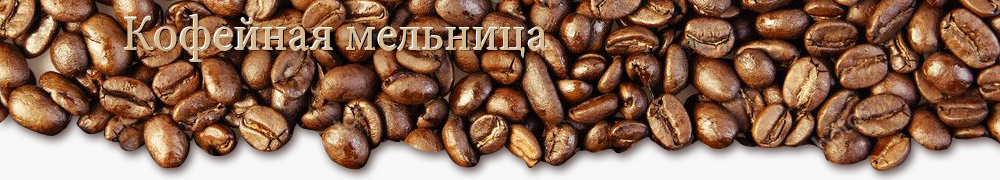
<style>
.page{position:relative;width:1000px;height:180px}
.page>*{position:absolute;margin:0}
.t1{font:49.6px "MinionPro-Regular";color:#d6ba92}
</style>
<div class="page">
<p class="t1" style="left:123px;top:13px;width:424px;height:48px">Кофейная мельница</p>
<p class="t1" style="left:124px;top:14px;width:424px;height:48px">Кофейная мельница</p>
<p class="t1" style="left:125px;top:15px;width:424px;height:48px">Кофейная мельница</p>
</div>
